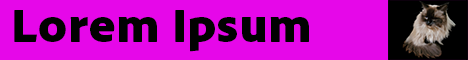
<style>
.page{position:relative;width:468px;height:60px;background:#e607e9}
.page>*{position:absolute;margin:0}
.t1{font:50px "AdobeClean-Black";letter-spacing:0.01em;color:#010101}
</style>
<div class="page">
<p class="t1" style="left:14px;top:10px;width:295px;height:42px">Lorem Ipsum</p>
</div>
